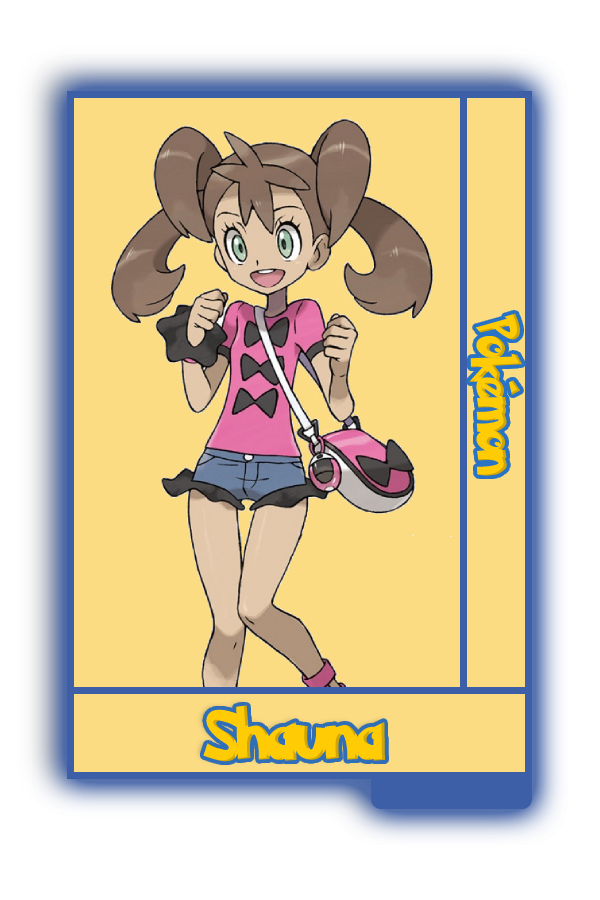
<style>
.page{position:relative;width:600px;height:900px;background:#fbdc83}
.page>*{position:absolute;margin:0}
.t1{font:48.8px "PokemonSolidNormal";color:#ffcb05;scale:0.8 1}
.t2{font:56.6px "PokemonSolidNormal";color:#ffcb05;scale:0.92 1}
</style>
<div class="page">
<p class="t1" style="left:469px;top:313px;width:54px;height:163px;rotate:90deg">Pokémon</p>
<p class="t2" style="left:203px;top:705px;width:182px;height:57px">Shauna</p>
</div>
